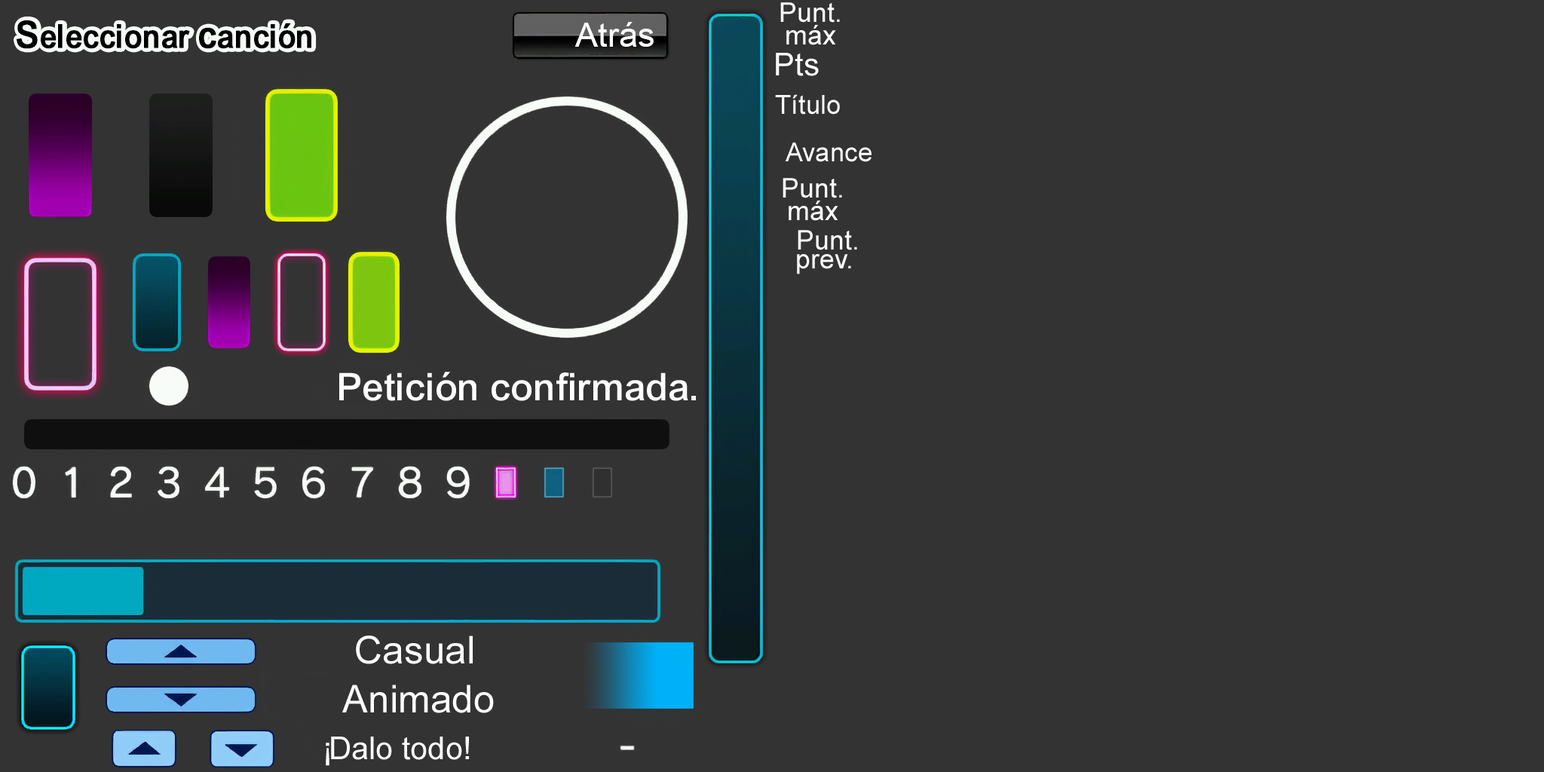
<style>
.page{position:relative;width:1544px;height:772px;background:#333333}
.page>*{position:absolute;margin:0}
.t1{font:27.1px/22.6px "ArialMT";letter-spacing:0.005em;color:#ffffff}
.t2{font:35px "Arial-Mdm";color:#000000;font-weight:bold;scale:0.92 1}
.t3{font:40.1px "Arial-Mdm";color:#000000;font-weight:bold;scale:0.92 1}
.t4{font:33.9px "ArialMT";color:#ffffff}
.t5{font:31.4px "ArialMT";letter-spacing:0.005em;color:#ffffff}
.t6{font:26.3px "ArialMT";letter-spacing:0.005em;color:#ffffff}
.t7{font:27.1px/18.9px "ArialMT";letter-spacing:0.005em;color:#ffffff}
.t8{font:41.1px "Arial-Mdm";color:#fefefe}
.t9{font:38.4px "ArialMT";letter-spacing:0.005em;color:#ffffff}
.t10{font:31.4px "ArialMT";color:#ffffff}
.t11{font:31.4px "ArialMT";letter-spacing:-0.14em;color:#ffffff}
.t12{font:31.4px "ArialMT";letter-spacing:-0.1em;color:#ffffff}
</style>
<div class="page">
<p class="t1" style="left:780px;top:2px;width:60px;height:43px;text-align:center">Punt.<br> máx</p>
<p class="t2" style="left:17px;top:20px;width:294px;height:29px"><span class="t3">S</span>eleccionar <span class="t3">c</span>anción</p>
<p class="t4" style="left:575px;top:22px;width:79px;height:25px">Atrás</p>
<p class="t5" style="left:776px;top:53px;width:43px;height:23px">Pts</p>
<p class="t6" style="left:775px;top:94px;width:65px;height:21px">Título</p>
<p class="t6" style="left:785px;top:143px;width:87px;height:19px">Avance</p>
<p class="t1" style="left:783px;top:178px;width:59px;height:43px;text-align:center">Punt.<br> máx</p>
<p class="t7" style="left:797px;top:230px;width:60px;height:44px;text-align:center">Punt.<br> prev.</p>
<p class="t8" style="left:339px;top:372px;width:357px;height:29px">Petición confirmada.</p>
<p class="t9" style="left:356px;top:636px;width:117px;height:28px">Casual</p>
<p class="t9" style="left:342px;top:685px;width:152px;height:28px">Animado</p>
<p class="t10" style="left:326px;top:737px;width:143px;height:29px"><span class="t11">¡</span>Dalo todo<span class="t12">!</span></p>
</div>
